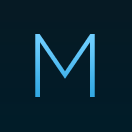
<style>
.page{position:relative;width:132px;height:132px}
.page>*{position:absolute;margin:0}
.t1{font:90px "GothamLight";letter-spacing:-0.08em;color:#57bff4}
</style>
<div class="page">
<p class="t1" style="left:35px;top:34px;width:60px;height:63px">M</p>
</div>
